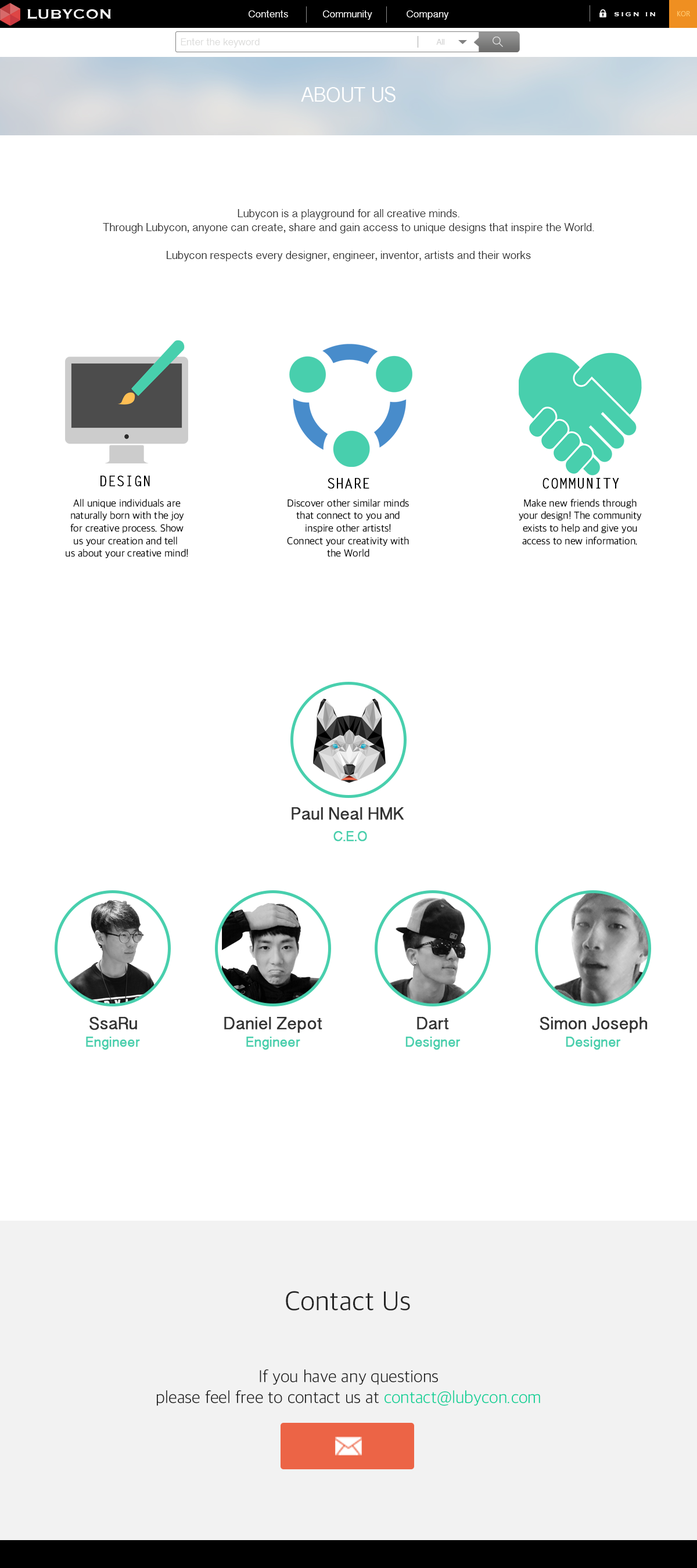
<style>
.page{position:relative;width:697px;height:1568px;background:#ffffff}
.page>*{position:absolute;margin:0}
.t1{font:17.4px "Copperplate";color:#ffffff}
.t2{font:10.5px "TamilSangamMN";color:#ffffff}
.t3{font:8.1px "Copperplate";letter-spacing:0.2em;color:#ffffff}
.t4{font:7px "LaoUI";color:#ffc76b}
.t5{font:10.5px "TamilSangamMN";color:#dbdbda}
.t6{font:8.1px "TamilSangamMN";color:#d0d0d0}
.t7{font:20.9px "TamilSangamMN";color:#ffffff}
.t8{font:11.6px "TamilSangamMN";color:#333333}
.t9{font:13.9px "LetterGothicStd";color:#000000;font-weight:bold}
.t10{font:10.5px "AppleSDGothicNeo-Light";color:#000000}
.t11{font:17.4px "TamilSangamMN";color:#333333;font-weight:bold}
.t12{font:13.9px "TamilSangamMN";color:#48cfad;font-weight:bold}
.t13{font:27.9px "AppleSDGothicNeo-Light";color:#252525}
.t14{font:17.4px "AppleSDGothicNeo-UltraLight";color:#1f1f1f}
.t15{font:17.4px "AppleSDGothicNeo-UltraLight";color:#05cf94}
</style>
<div class="page">
<p class="t1" style="left:27px;top:9px;width:84px;height:10px">LUBYCON</p>
<p class="t2" style="left:249px;top:10px;width:39px;height:7px">Contents</p>
<p class="t2" style="left:323px;top:10px;width:49px;height:10px">Community</p>
<p class="t2" style="left:407px;top:10px;width:42px;height:10px">Company</p>
<p class="t3" style="left:614px;top:12px;width:41px;height:4px">SIGN IN</p>
<p class="t4" style="left:677px;top:11px;width:14px;height:5px">KOR</p>
<p class="t5" style="left:181px;top:38px;width:79px;height:10px">Enter the keyword</p>
<p class="t6" style="left:436px;top:39px;width:8px;height:6px">All</p>
<p class="t7" style="left:301px;top:87px;width:94px;height:15px">ABOUT US</p>
<p class="t8" style="left:103px;top:209px;width:491px;height:52px;text-align:center">Lubycon is a playground for all creative minds.<br>Through Lubycon, anyone can create, share and gain access to unique designs that inspire the World.<br><br>Lubycon respects every designer, engineer, inventor, artists and their works</p>
<p class="t9" style="left:100px;top:476px;width:50px;height:11px">DESIGN</p>
<p class="t9" style="left:328px;top:478px;width:41px;height:11px">SHARE</p>
<p class="t9" style="left:542px;top:478px;width:77px;height:11px">COMMUNITY</p>
<p class="t10" style="left:66px;top:499px;width:122px;height:59px;text-align:center">All unique individuals are<br>naturally born with the joy<br>for creative process. Show<br>us your creation and tell <br>us about your creative mind!</p>
<p class="t10" style="left:287px;top:499px;width:122px;height:58px;text-align:center">Discover other similar minds<br>that connect to you and<br>inspire other artists!<br>Connect your creativity with<br>the World</p>
<p class="t10" style="left:519px;top:499px;width:123px;height:46px;text-align:center">Make new friends through<br>your design! The community<br>exists to help and give you<br>access to new information.</p>
<p class="t11" style="left:292px;top:807px;width:112px;height:13px">Paul Neal HMK</p>
<p class="t12" style="left:333px;top:831px;width:34px;height:10px">C.E.O</p>
<p class="t11" style="left:89px;top:1017px;width:48px;height:13px">SsaRu</p>
<p class="t11" style="left:224px;top:1017px;width:98px;height:16px">Daniel Zepot</p>
<p class="t11" style="left:417px;top:1017px;width:32px;height:13px">Dart</p>
<p class="t11" style="left:540px;top:1017px;width:108px;height:16px">Simon Joseph</p>
<p class="t12" style="left:86px;top:1037px;width:54px;height:13px">Engineer</p>
<p class="t12" style="left:246px;top:1037px;width:54px;height:13px">Engineer</p>
<p class="t12" style="left:405px;top:1037px;width:56px;height:13px">Designer</p>
<p class="t12" style="left:566px;top:1037px;width:55px;height:13px">Designer</p>
<p class="t13" style="left:286px;top:1291px;width:124px;height:20px">Contact Us</p>
<p class="t14" style="left:157px;top:1369px;width:383px;height:37px;text-align:center">If you have any questions<br>please feel free to contact us at <span class="t15">contact@lubycon.com</span></p>
</div>
